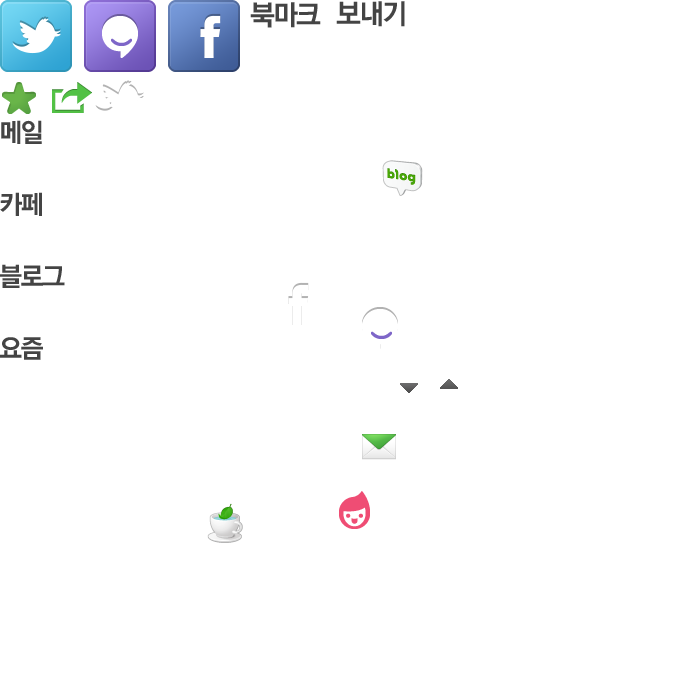
<style>
.page{position:relative;width:700px;height:700px;background:#ffffff}
.page>*{position:absolute;margin:0}
.t1{font:28px "YGO550";letter-spacing:-0.075em;color:#444444}
.t2{font:26px/72px "YGO550";letter-spacing:-0.075em;color:#444444}
</style>
<div class="page">
<p class="t1" style="left:250px;top:2px;width:71px;height:26px">북마크</p>
<p class="t1" style="left:336px;top:1px;width:69px;height:26px">보내기</p>
<p class="t2" style="left:0px;top:120px;width:65px;height:240px">메일<br>카페<br>블로그<br>요즘</p>
</div>
